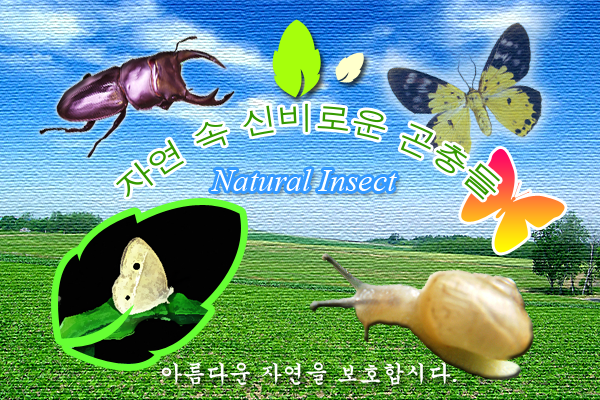
<style>
.page{position:relative;width:600px;height:400px}
.page>*{position:absolute;margin:0}
.t1{font:32px/50px "Dotum";color:#339900}
.t2{font:32px "TimesNewRomanPS-ItalicMT";color:#ffffff}
.t3{font:23px "Gungsuh";color:#ffffff}
</style>
<div class="page">
<p class="t1" style="left:116px;top:103px;width:384px;height:97px;text-align:center">자연 속 신비로운 곤충들</p>
<p class="t2" style="left:211px;top:169px;width:186px;height:22px">Natural Insect</p>
<p class="t3" style="left:161px;top:362px;width:296px;height:24px">아름다운 자연을 보호합시다.</p>
</div>
